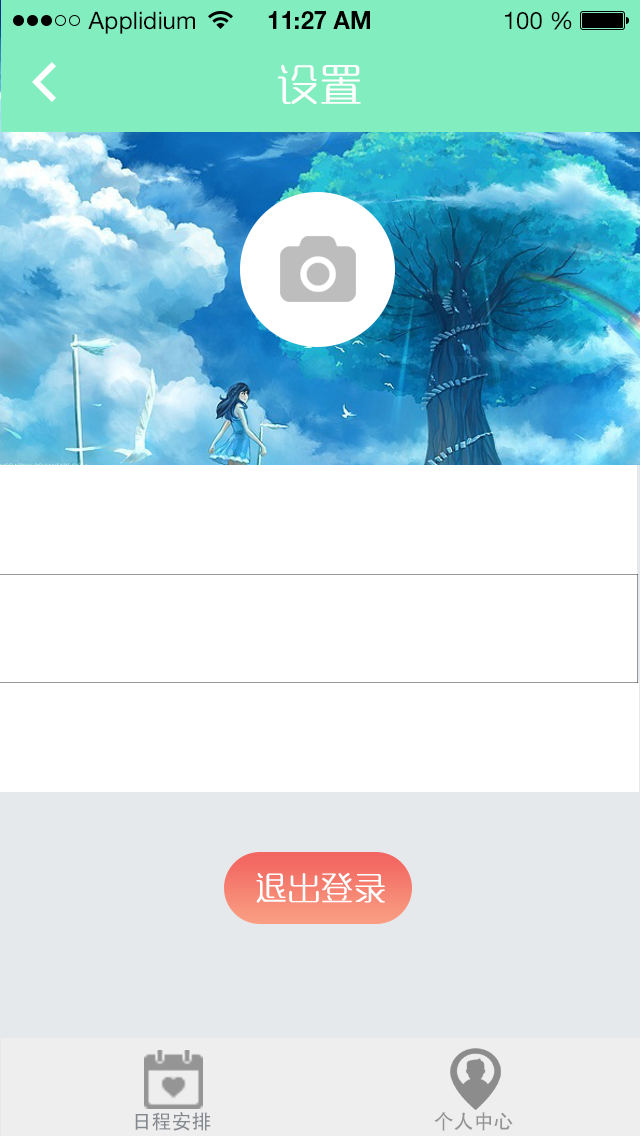
<style>
.page{position:relative;width:640px;height:1136px;background:#ffffff}
.page>*{position:absolute;margin:0}
.t1{font:24px "HelveticaNeueLTStd-Roman";color:#000000}
.t2{font:24px "HelveticaNeueLTStd-Bd";color:#000000}
.t3{font:40px "MFYaYuan_Noncommercial-Regular";letter-spacing:0.1em;color:#fefefe}
.t4{font:30px "MFYaYuan_Noncommercial-Regular";letter-spacing:0.1em;color:#feffff}
.t5{font:20px "AdobeHeitiStd-Regular";color:#84898f}
.t6{font:20px "AdobeHeitiStd-Regular";color:#939393}
</style>
<div class="page">
<p class="t1" style="left:88px;top:11px;width:107px;height:23px">Applidium</p>
<p class="t2" style="left:268px;top:11px;width:102px;height:18px">11:27 AM</p>
<p class="t1" style="left:505px;top:11px;width:67px;height:19px">100 %</p>
<p class="t3" style="left:278px;top:64px;width:83px;height:41px">设置</p>
<p class="t4" style="left:256px;top:873px;width:129px;height:30px">退出登录</p>
<p class="t5" style="left:135px;top:1112px;width:76px;height:19px">日程安排</p>
<p class="t6" style="left:434px;top:1112px;width:79px;height:19px">个人中心</p>
</div>
